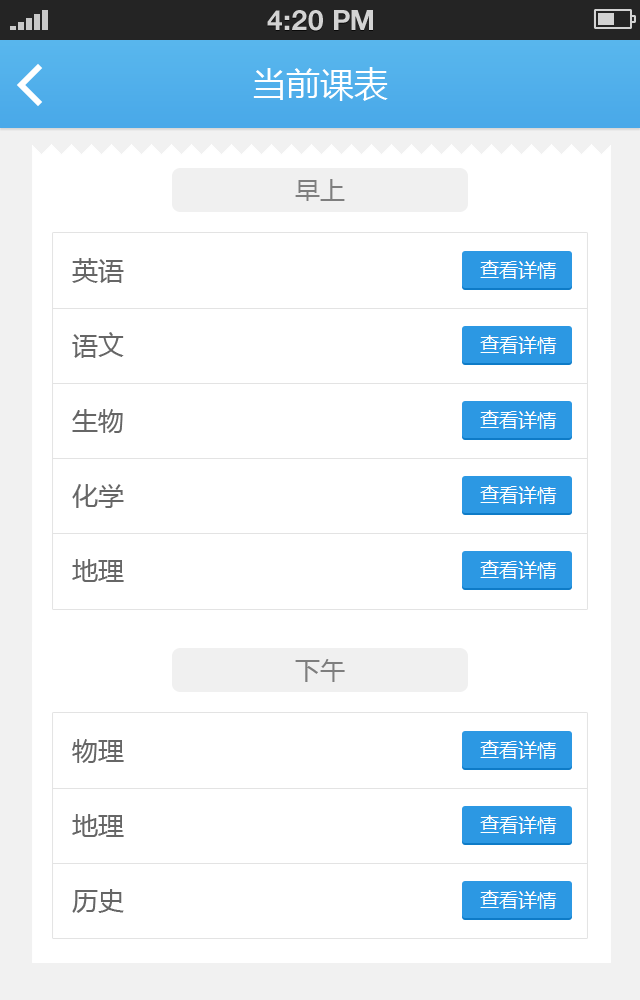
<style>
.page{position:relative;width:640px;height:1000px;background:#ffffff}
.page>*{position:absolute;margin:0}
.t1{font:28px "HelveticaNeueLTStd-Bd";color:#d3d3d3;text-transform:uppercase}
.t2{font:34px "MicrosoftYaHei";color:#ffffff}
.t3{font:25px "MicrosoftYaHei";color:#7e7e7e}
.t4{font:26px/75px "MicrosoftYaHei";color:#666666}
</style>
<div class="page">
<p class="t1" style="left:267px;top:10px;width:106px;height:21px">4:20 PM</p>
<p class="t2" style="left:253px;top:67px;width:135px;height:34px">当前课表</p>
<p class="t3" style="left:295px;top:179px;width:50px;height:22px">早上</p>
<p class="t4" style="left:72px;top:258px;width:52px;height:324px">英语<br>语文<br>生物<br>化学<br>地理</p>
<p class="t3" style="left:295px;top:659px;width:50px;height:23px">下午</p>
<p class="t4" style="left:72px;top:739px;width:52px;height:174px">物理<br>地理<br>历史</p>
</div>
